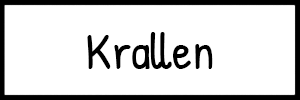
<style>
.page{position:relative;width:300px;height:100px;background:#ffffff}
.page>*{position:absolute;margin:0}
.t1{font:50px "PatrickHand-Regular";color:#000000}
</style>
<div class="page">
<p class="t1" style="left:87px;top:32px;width:126px;height:37px">Krallen</p>
</div>
